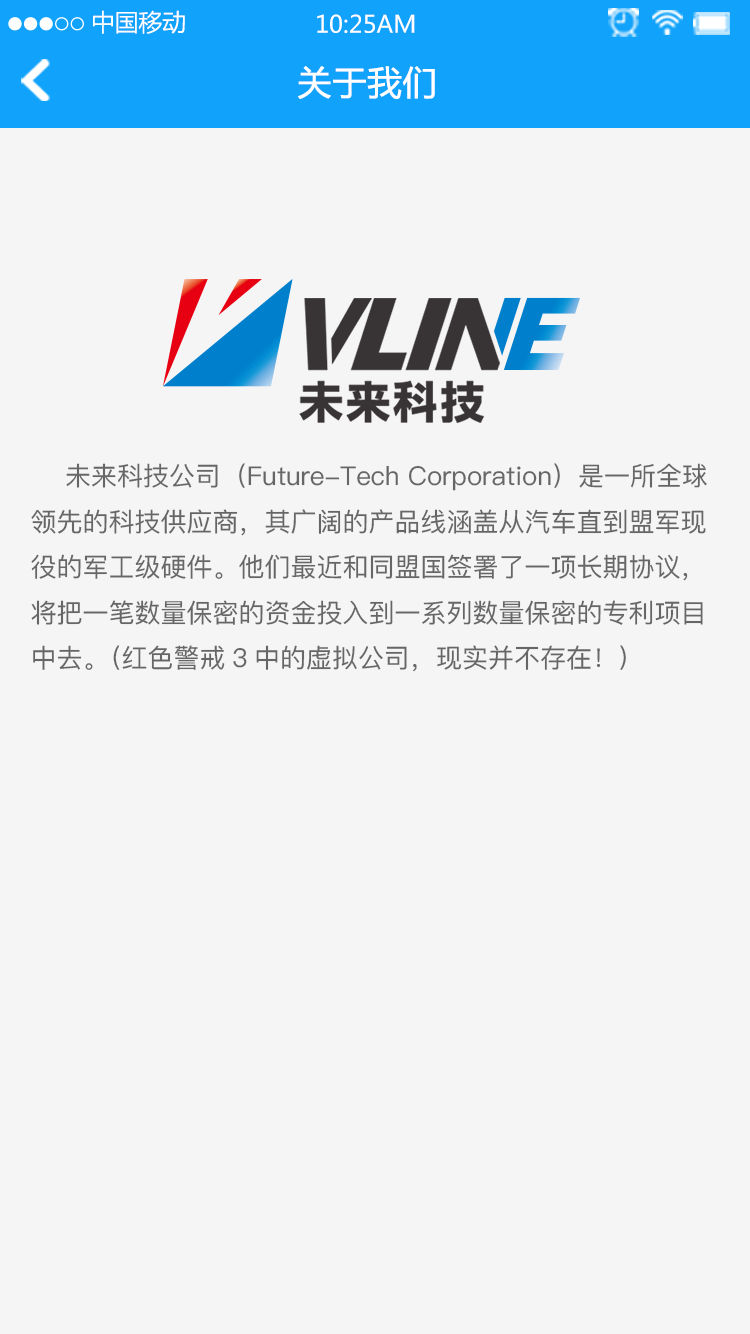
<style>
.page{position:relative;width:750px;height:1334px;background:#f5f5f5}
.page>*{position:absolute;margin:0}
.t1{font:23.7px "MicrosoftYaHei";color:#ffffff}
.t2{font:34px "MicrosoftYaHei";color:#ffffff;font-weight:bold}
.t3{font:26px "PingFang-SC-Medium";color:#666666}
</style>
<div class="page">
<p class="t1" style="left:93px;top:10px;width:92px;height:24px">中国移动</p>
<p class="t1" style="left:317px;top:14px;width:98px;height:19px">10:25AM</p>
<p class="t2" style="left:298px;top:66px;width:137px;height:33px">关于我们</p>
<p class="t3" style="left:31px;top:463px;width:676px;height:209px">未来科技公司（Future-Tech Corporation）是一所全球领先的科技供应商，其广阔的产品线涵盖从汽车直到盟军现役的军工级硬件。他们最近和同盟国签署了一项长期协议，将把一笔数量保密的资金投入到一系列数量保密的专利项目中去。（红色警戒3中的虚拟公司，现实并不存在！）</p>
</div>
